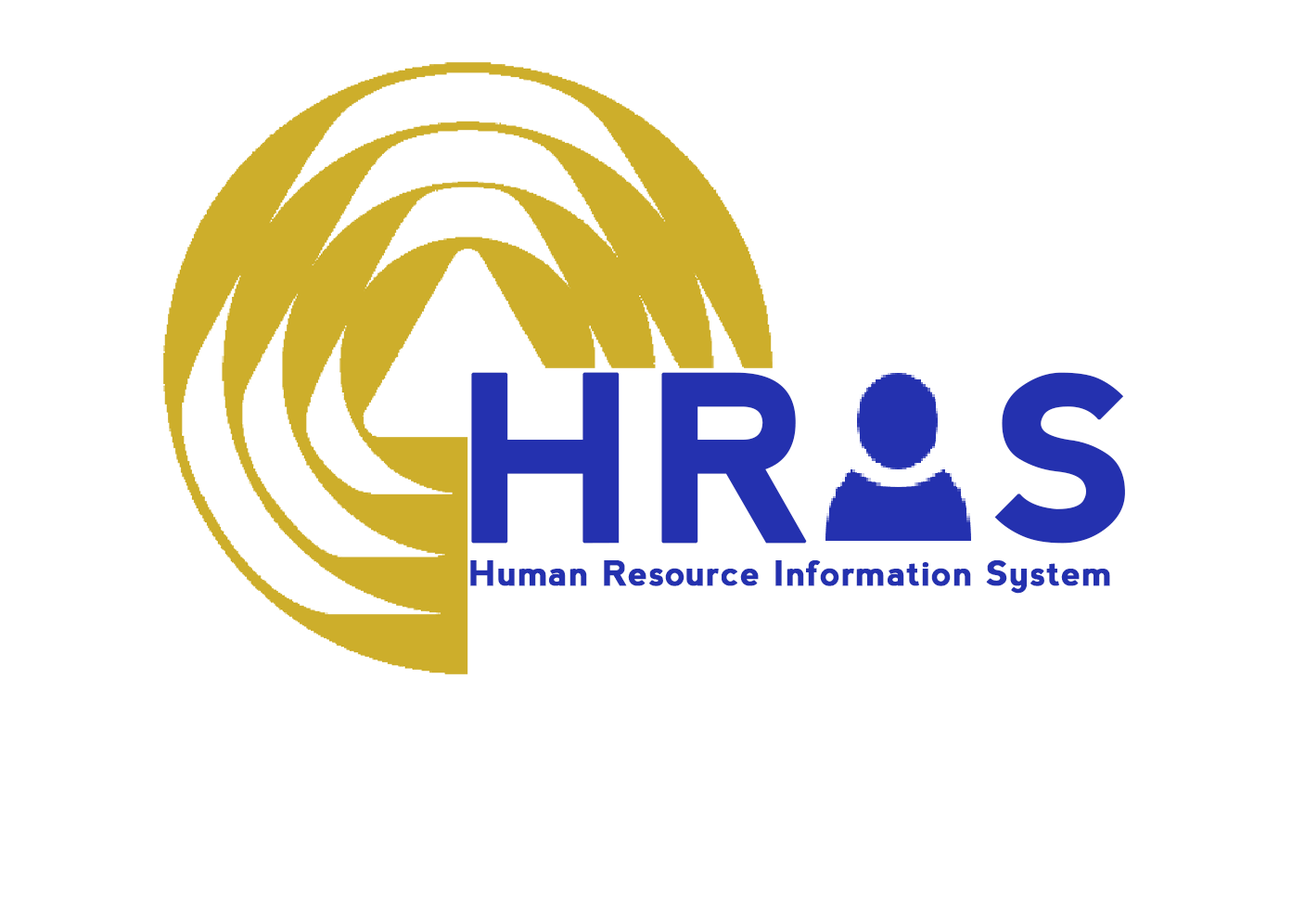
<style>
.page{position:relative;width:1292px;height:923px;background:#ffffff}
.page>*{position:absolute;margin:0}
.t1{font:229px "nevis-Bold";letter-spacing:0.014em;color:#2431af;font-weight:bold}
.t2{font:34.4px "nevis-Bold";letter-spacing:0.014em;color:#2431af;font-weight:bold}
</style>
<div class="page">
<p class="t1" style="left:471px;top:372px;width:654px;height:172px">HR  S</p>
<p class="t2" style="left:470px;top:560px;width:640px;height:34px">Human Resource Information System</p>
</div>
